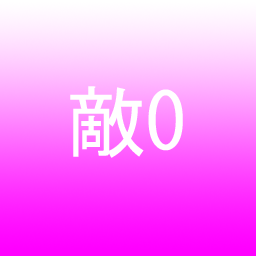
<style>
.page{position:relative;width:256px;height:256px}
.page>*{position:absolute;margin:0}
.t1{font:80px "MS-Gothic";color:#ffffff}
</style>
<div class="page">
<p class="t1" style="left:70px;top:86px;width:113px;height:72px">敵0</p>
</div>
